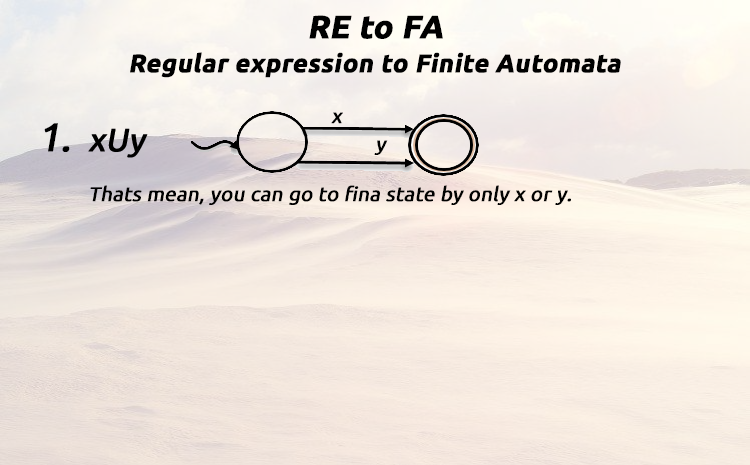
<style>
.page{position:relative;width:750px;height:465px}
.page>*{position:absolute;margin:0}
.t1{font:32px "Ubuntu-Bold";color:#000000;font-weight:bold;font-style:italic}
.t2{font:25.3px "Ubuntu-Bold";color:#000000;font-weight:bold;font-style:italic}
.t3{font:20px "Ubuntu";color:#000000;font-weight:bold;font-style:italic}
.t4{font:40px "Ubuntu";color:#000000;font-weight:bold;font-style:italic}
</style>
<div class="page">
<p class="t1" style="left:309px;top:15px;width:134px;height:24px">RE to FA</p>
<p class="t2" style="left:130px;top:52px;width:491px;height:26px">Regular expression to Finite Automata</p>
<p class="t3" style="left:331px;top:112px;width:12px;height:12px">x</p>
<p class="t4" style="left:44px;top:123px;width:26px;height:29px">1.</p>
<p class="t3" style="left:374px;top:140px;width:14px;height:15px">y</p>
<p class="t3" style="left:90px;top:185px;width:481px;height:20px">Thats mean, you can go to fina state by only x or y.</p>
</div>
